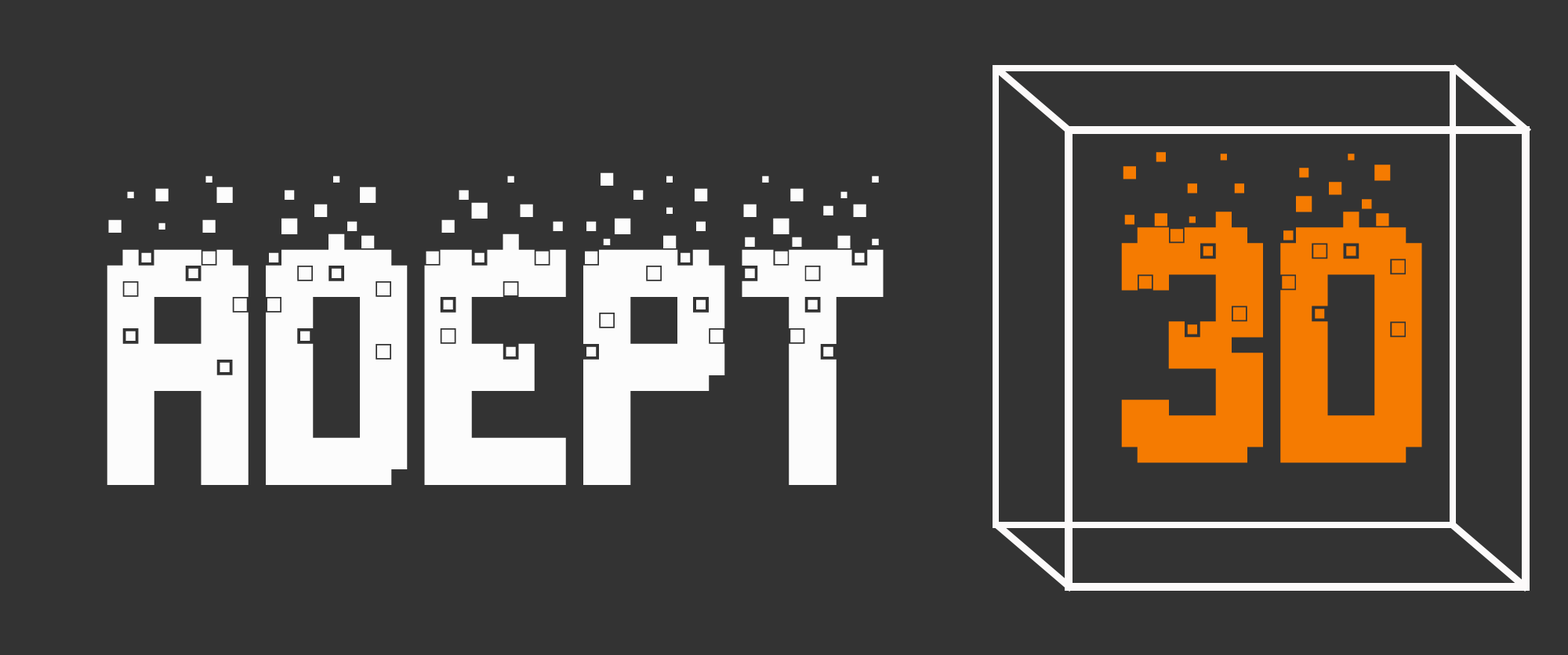
<style>
.page{position:relative;width:1568px;height:655px;background:#333333}
.page>*{position:absolute;margin:0}
.t1{font:392px "Nightmare-Codehack";letter-spacing:0.005em;color:#f57b01}
.t2{font:392px "Nightmare-Codehack";letter-spacing:0.005em;color:#fcfcfc}
</style>
<div class="page">
<p class="t1" style="left:1121px;top:152px;width:301px;height:311px">3D</p>
<p class="t2" style="left:107px;top:172px;width:777px;height:313px">ADEPT</p>
</div>
